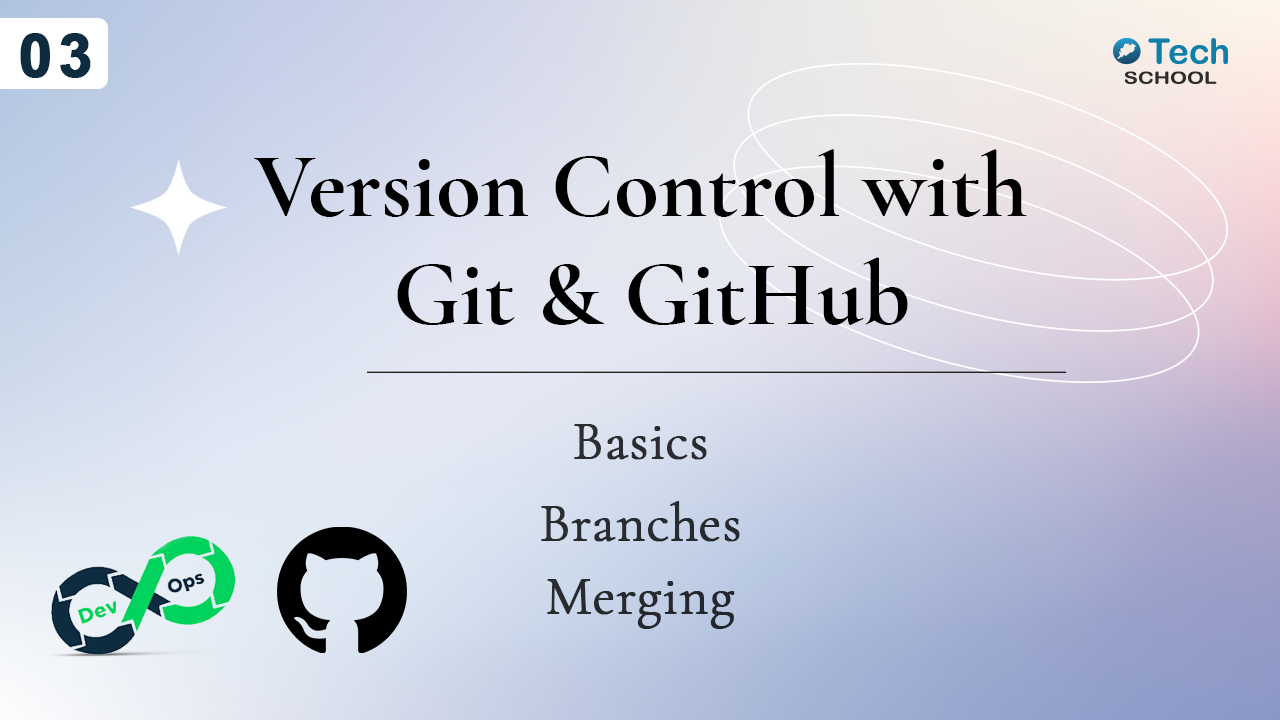
<style>
.page{position:relative;width:1280px;height:720px}
.page>*{position:absolute;margin:0}
.t1{font:60.3px "Arial-BoldMT";letter-spacing:0.08em;color:#0d2c40;font-weight:bold}
.t2{font:91.8px/108.6px "CormorantGaramond-Bold";color:#000000}
.t3{font:55px "CormorantGaramond-Light";color:#2b2c30;font-weight:bold}
.t4{font:55px "CormorantGaramond-Light";color:#282b2f;font-weight:bold}
.t5{font:55px "CormorantGaramond-Light";color:#25292e;font-weight:bold}
</style>
<div class="page">
<p class="t1" style="left:20px;top:33px;width:71px;height:45px">03</p>
<p class="t2" style="left:254px;top:149px;width:773px;height:176px;text-align:center">Version Control with <br>Git &amp; GitHub</p>
<p class="t3" style="left:574px;top:424px;width:133px;height:36px">Basics</p>
<p class="t4" style="left:541px;top:501px;width:199px;height:41px">Branches</p>
<p class="t5" style="left:547px;top:579px;width:188px;height:50px">Merging</p>
</div>
